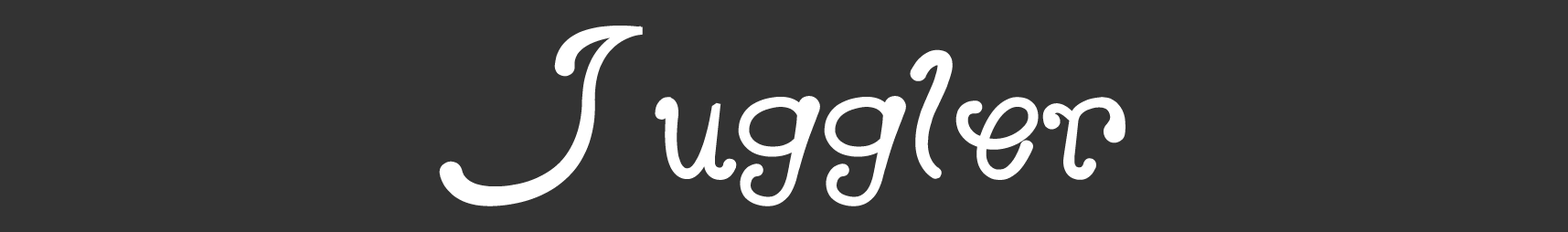
<style>
.page{position:relative;width:1568px;height:232px;background:#333333}
.page>*{position:absolute;margin:0}
.t1{font:173.5px "Single";color:#ffffff;font-weight:bold}
</style>
<div class="page">
<p class="t1" style="left:439px;top:26px;width:686px;height:181px">Juggler</p>
</div>
